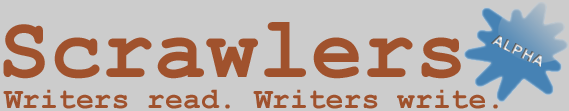
<style>
.page{position:relative;width:569px;height:111px;background:#cccccc}
.page>*{position:absolute;margin:0}
.t1{font:86.6px "CourierNewPS-BoldMT";color:#a0522d}
.t2{font:14.9px "Verdana-Bold"}
.t3{font:29.7px "CourierNewPS-BoldMT";color:#a0522d}
</style>
<div class="page">
<p class="t1" style="left:3px;top:22px;width:458px;height:57px">Scrawlers</p>
<p class="t2" style="left:491px;top:35px;width:51px;height:32px;rotate:26deg">ALPHA</p>
<p class="t3" style="left:3px;top:89px;width:495px;height:20px">Writers read. Writers write.</p>
</div>
